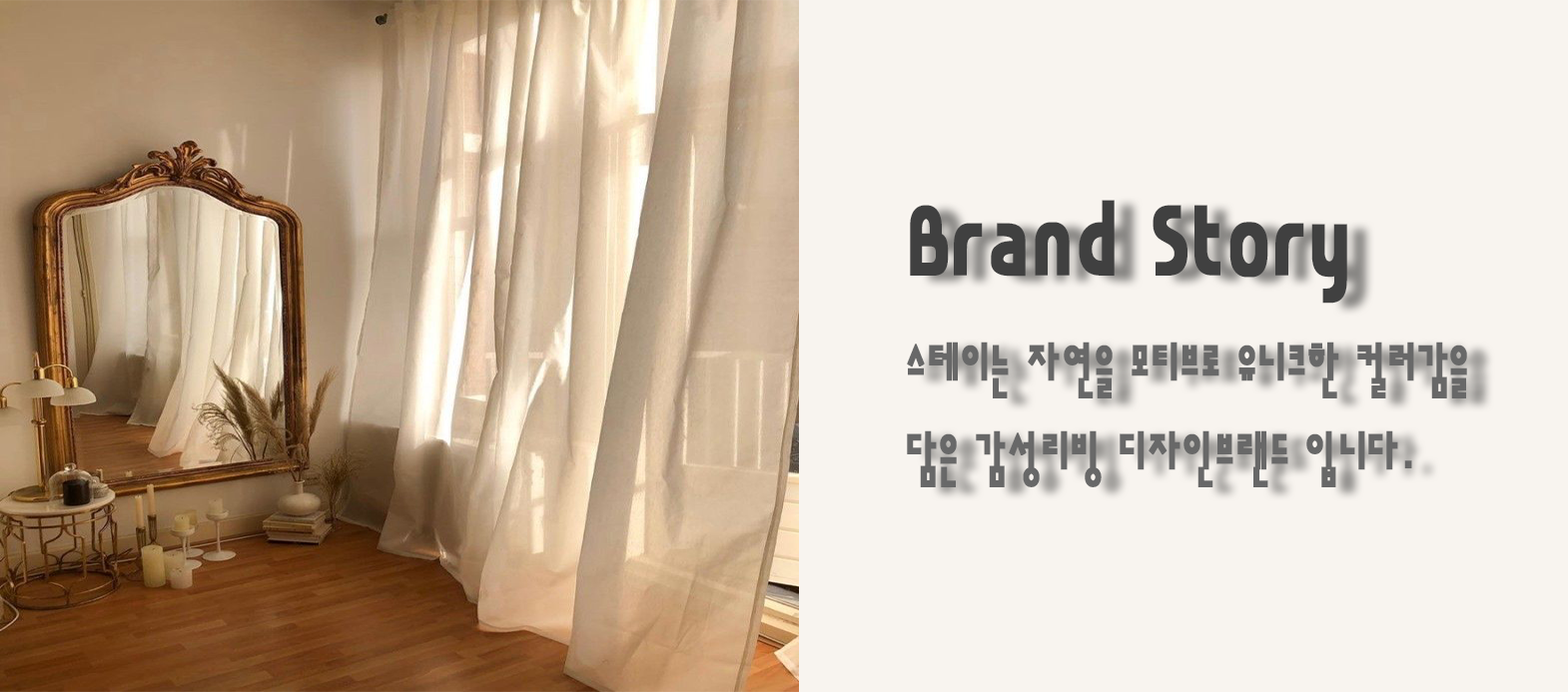
<style>
.page{position:relative;width:1568px;height:692px;background:#f8f4ef}
.page>*{position:absolute;margin:0}
.t1{font:59.2px/44.4px "ahn2006-B";color:#686868;font-weight:bold;scale:0.79 1}
.t2{font:74px/44.4px "ahn2006-B";color:#ffd400;font-weight:bold;scale:0.79 1}
.t3{font:123.3px/44.4px "ahn2006-B";color:#404040;font-weight:bold;scale:0.79 1}
</style>
<div class="page">
<p class="t1" style="left:907px;top:200px;width:560px;height:287px"><span class="t2"><br></span><span class="t3">Brand Story<br><br></span>스테이는 자연을 모티브로 유니크한 컬러감을<br><br>담은 감성리빙 디자인브랜드 입니다.</p>
</div>
